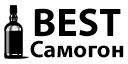
<style>
.page{position:relative;width:128px;height:64px;background:#ffffff}
.page>*{position:absolute;margin:0}
.t1{font:40px "MyriadPro-Bold";color:#000000}
.t2{font:24px "MyriadPro-Bold";color:#000000}
</style>
<div class="page">
<p class="t1" style="left:34px;top:8px;width:87px;height:29px">BEST</p>
<p class="t2" style="left:30px;top:40px;width:94px;height:18px">Самогон</p>
</div>
